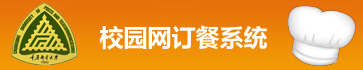
<style>
.page{position:relative;width:363px;height:70px}
.page>*{position:absolute;margin:0}
.t1{font:24px "MicrosoftYaHei-Bold";color:#ffffff}
</style>
<div class="page">
<p class="t1" style="left:99px;top:25px;width:169px;height:25px">校园网订餐系统</p>
</div>
